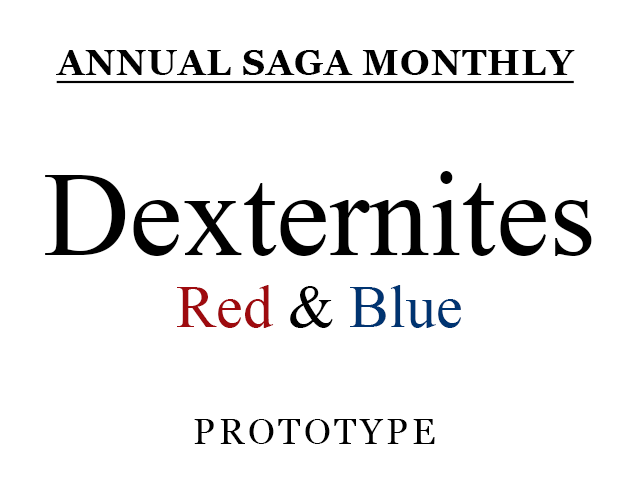
<style>
.page{position:relative;width:630px;height:500px;background:#ffffff}
.page>*{position:absolute;margin:0}
.t1{font:36px "Georgia-Bold";letter-spacing:0.025em;color:#000000;text-decoration:underline}
.t2{font:120px "TimesNewRomanPSMT";color:#000000}
.t3{font:60px "TimesNewRomanPSMT";color:#9e0b0f}
.t4{font:60px "TimesNewRomanPSMT";color:#000000}
.t5{font:60px "TimesNewRomanPSMT";color:#003471}
.t6{font:36px "Georgia";letter-spacing:0.1em;color:#000000}
</style>
<div class="page">
<p class="t1" style="left:56px;top:50px;width:519px;height:34px">ANNUAL SAGA MONTHLY</p>
<p class="t2" style="left:45px;top:171px;width:547px;height:157px;text-align:center">Dexternites<br><span class="t3">Red</span><span class="t4"> &amp; </span><span class="t5">Blue</span></p>
<p class="t6" style="left:194px;top:419px;width:241px;height:25px">PROTOTYPE</p>
</div>
